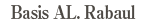
<style>
.page{position:relative;width:144px;height:25px;background:#ffffff}
.page>*{position:absolute;margin:0}
.t1{font:18px "RyuminPro-ExBold";letter-spacing:-0.04em;color:#4c4843;scale:0.9 1}
</style>
<div class="page">
<p class="t1" style="left:11px;top:5px;width:125px;height:15px">Basis AL. Rabaul</p>
</div>
